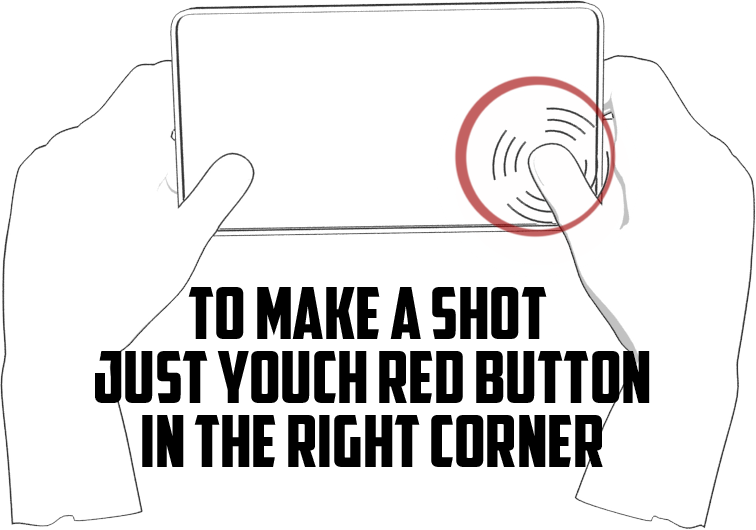
<style>
.page{position:relative;width:756px;height:530px;background:#ffffff}
.page>*{position:absolute;margin:0}
.t1{font:72px/64px "AmericanCaptain";color:#000000}
</style>
<div class="page">
<p class="t1" style="left:95px;top:287px;width:555px;height:180px;text-align:center">TO MAKE A SHOT <br>JUST YOUCH RED BUTTON<br>IN THE RIGHT CORNER</p>
</div>
